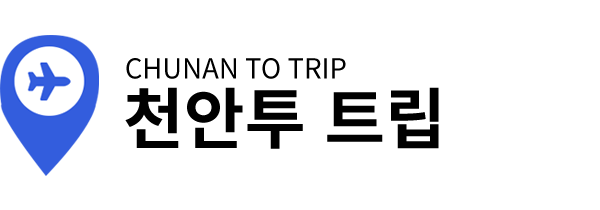
<style>
.page{position:relative;width:600px;height:210px;background:#ffffff}
.page>*{position:absolute;margin:0}
.t1{font:27.6px "NotoSansCJKkr-Regular";color:#000000}
.t2{font:66.4px "NotoSansCJKkr-Bold";color:#000000}
</style>
<div class="page">
<p class="t1" style="left:126px;top:58px;width:220px;height:21px">CHUNAN TO TRIP</p>
<p class="t2" style="left:125px;top:87px;width:314px;height:62px">천안투 트립</p>
</div>
